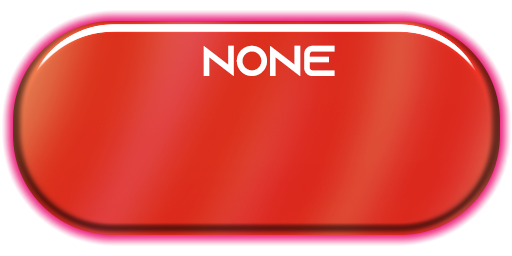
<style>
.page{position:relative;width:512px;height:256px}
.page>*{position:absolute;margin:0}
.t1{font:42.8px "AzonixRegular";color:#ffffff}
</style>
<div class="page">
<p class="t1" style="left:203px;top:45px;width:132px;height:31px">None</p>
</div>
